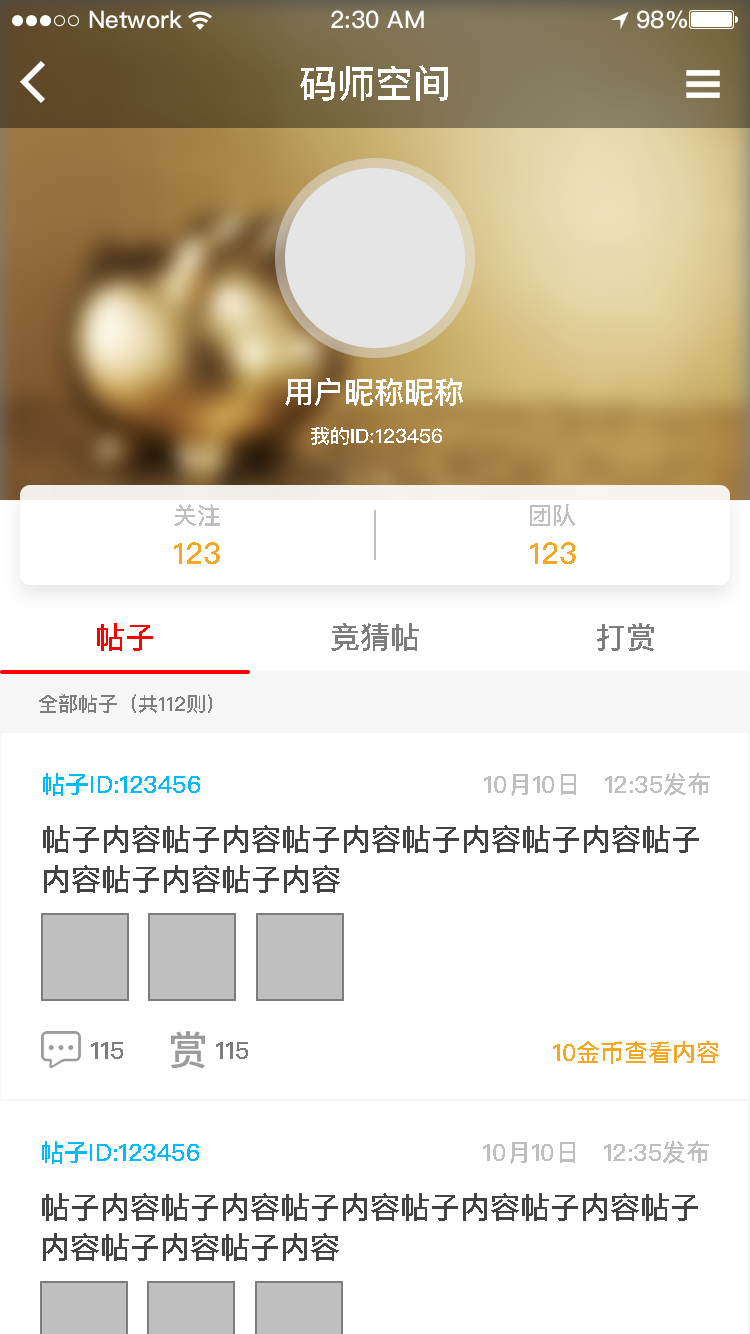
<style>
.page{position:relative;width:750px;height:1334px;background:#ffffff}
.page>*{position:absolute;margin:0}
.t1{font:38px "PingFangSC-Medium";color:#ffffff;text-transform:uppercase}
.t2{font:30px "PingFangSC-Medium";color:#ffffff;text-transform:uppercase}
.t3{font:20px "PingFangSC-Medium";color:#ffffff;text-transform:uppercase}
.t4{font:24px "PingFangSC-Medium";color:#bfbfbf;text-transform:uppercase}
.t5{font:30px "PingFangSC-Medium";color:#f6a623;text-transform:uppercase}
.t6{font:30px "PingFangSC-Medium";color:#ff0000;text-transform:uppercase}
.t7{font:30px "PingFangSC-Medium";color:#7d7d7d;text-transform:uppercase}
.t8{font:20px "PingFangSC-Medium";color:#7d7d7d;text-transform:uppercase}
.t9{font:24px "PingFangSC-Medium";color:#01b9fd;text-transform:uppercase}
.t10{font:24px "PingFangSC-Medium";color:#01b9fd}
.t11{font:30px/40px "PingFangSC-Medium";color:#434343;text-transform:uppercase}
.t12{font:24px "PingFangSC-Medium";color:#7d7d7d;text-transform:uppercase}
.t13{font:24px "PingFangSC-Medium";color:#f6a623;text-transform:uppercase}
</style>
<div class="page">
<p class="t1" style="left:300px;top:65px;width:148px;height:36px">码师空间</p>
<p class="t2" style="left:285px;top:378px;width:178px;height:28px">用户昵称昵称</p>
<p class="t3" style="left:311px;top:427px;width:131px;height:18px">我的id:123456</p>
<p class="t4" style="left:174px;top:504px;width:46px;height:22px">关注</p>
<p class="t4" style="left:530px;top:504px;width:45px;height:22px">团队</p>
<p class="t5" style="left:174px;top:542px;width:46px;height:22px">123</p>
<p class="t5" style="left:530px;top:542px;width:46px;height:22px">123</p>
<p class="t6" style="left:97px;top:623px;width:56px;height:28px">帖子</p>
<p class="t7" style="left:331px;top:623px;width:88px;height:28px">竞猜帖</p>
<p class="t7" style="left:597px;top:623px;width:57px;height:28px">打赏</p>
<p class="t8" style="left:39px;top:694px;width:173px;height:19px">全部帖子（共112则）</p>
<p class="t9" style="left:43px;top:773px;width:157px;height:23px">帖子<span class="t10">Ｉ</span>D:123456</p>
<p class="t4" style="left:484px;top:773px;width:226px;height:23px">10月10日   12:35发布</p>
<p class="t11" style="left:43px;top:825px;width:656px;height:68px">帖子内容帖子内容帖子内容帖子内容帖子内容帖子<br>内容帖子内容帖子内容</p>
<p class="t12" style="left:91px;top:1042px;width:32px;height:17px">115</p>
<p class="t12" style="left:216px;top:1042px;width:32px;height:17px">115</p>
<p class="t13" style="left:553px;top:1041px;width:166px;height:23px">10金币查看内容</p>
<p class="t9" style="left:42px;top:1141px;width:157px;height:23px">帖子<span class="t10">Ｉ</span>D:123456</p>
<p class="t4" style="left:483px;top:1141px;width:226px;height:23px">10月10日   12:35发布</p>
<p class="t11" style="left:42px;top:1193px;width:656px;height:68px">帖子内容帖子内容帖子内容帖子内容帖子内容帖子<br>内容帖子内容帖子内容</p>
</div>
